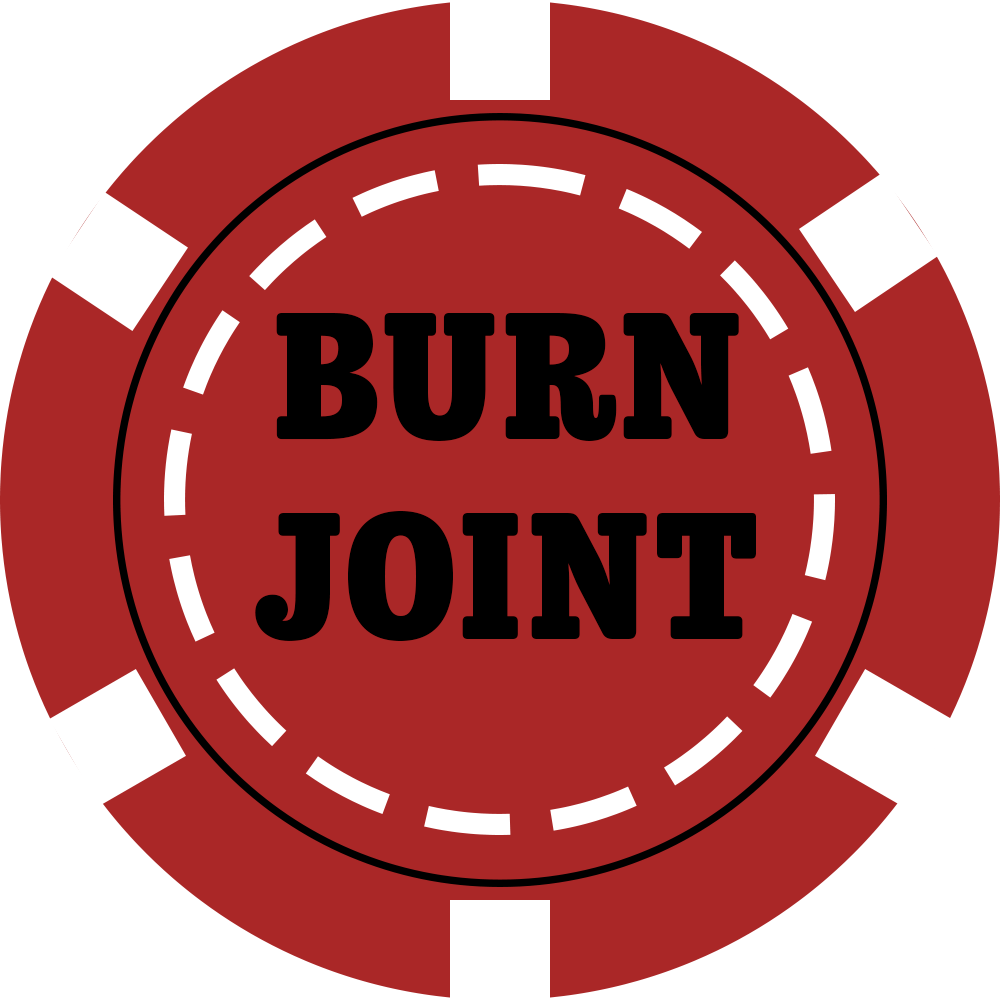
<style>
.page{position:relative;width:1000px;height:1000px;background:#aa2727}
.page>*{position:absolute;margin:0}
.t1{font:166.7px "Trevor-Extrabold";letter-spacing:0.04em;color:#000000}
</style>
<div class="page">
<p class="t1" style="left:255px;top:313px;width:501px;height:328px;text-align:center">BURN<br>JOINT</p>
</div>
